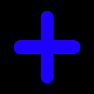
<style>
.page{position:relative;width:94px;height:94px;background:#000000}
.page>*{position:absolute;margin:0}
.t1{font:140.8px "CourierNewPS-BoldMT";color:#1e00ff;scale:0.9 1}
</style>
<div class="page">
<p class="t1" style="left:14px;top:11px;width:67px;height:72px">+</p>
</div>
